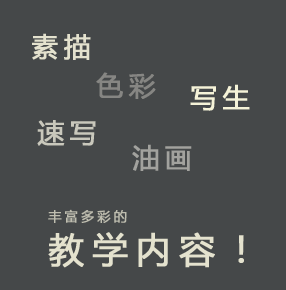
<style>
.page{position:relative;width:286px;height:290px;background:#454849}
.page>*{position:absolute;margin:0}
.t1{font:26.7px "MicrosoftYaHei";letter-spacing:0.2em;color:#e4e2ce;font-weight:bold}
.t2{font:26.7px "MicrosoftYaHei";letter-spacing:0.2em;color:#868683;font-weight:bold}
.t3{font:26.7px "MicrosoftYaHei";letter-spacing:0.2em;color:#f5f3d8;font-weight:bold}
.t4{font:26.7px "MicrosoftYaHei";letter-spacing:0.2em;color:#c9c8bc;font-weight:bold}
.t5{font:26.7px "MicrosoftYaHei";letter-spacing:0.2em;color:#a2a29e;font-weight:bold}
.t6{font:13.3px "MicrosoftYaHei";letter-spacing:0.2em;color:#bebdaf;font-weight:bold}
.t7{font:35.6px "MicrosoftYaHei";letter-spacing:0.2em;color:#e4e2ce;font-weight:bold}
</style>
<div class="page">
<p class="t1" style="left:32px;top:33px;width:59px;height:27px">素描</p>
<p class="t2" style="left:96px;top:72px;width:60px;height:27px">色彩</p>
<p class="t3" style="left:190px;top:84px;width:60px;height:27px">写生</p>
<p class="t4" style="left:37px;top:120px;width:59px;height:26px">速写</p>
<p class="t5" style="left:132px;top:144px;width:60px;height:27px">油画</p>
<p class="t6" style="left:48px;top:209px;width:79px;height:14px">丰富多彩的</p>
<p class="t7" style="left:48px;top:232px;width:196px;height:36px">教学内容！</p>
</div>
